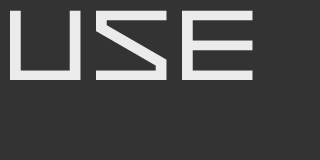
<style>
.page{position:relative;width:320px;height:160px;background:#333333}
.page>*{position:absolute;margin:0}
.t1{font:78px "7THDR2020ThinRegular";letter-spacing:0.08em;color:#ebebeb;font-weight:bold}
</style>
<div class="page">
<p class="t1" style="left:10px;top:10px;width:243px;height:70px">USE</p>
</div>
